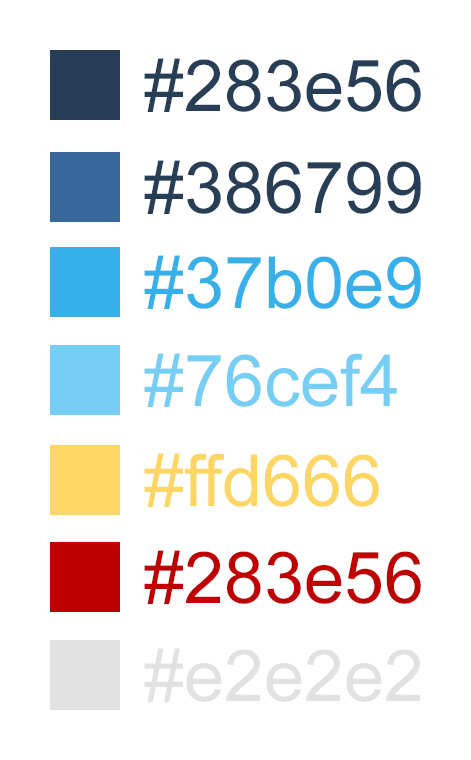
<style>
.page{position:relative;width:471px;height:760px;background:#ffffff}
.page>*{position:absolute;margin:0}
.t1{font:72px "ArialMT";color:#283e56}
.t2{font:72px "ArialMT";color:#37b0e9}
.t3{font:72px "ArialMT";color:#76cef4}
.t4{font:72px "ArialMT";color:#ffd666}
.t5{font:72px "ArialMT";color:#bd0000}
.t6{font:72px "ArialMT";color:#e2e2e2}
</style>
<div class="page">
<p class="t1" style="left:144px;top:58px;width:277px;height:54px">#283e56</p>
<p class="t1" style="left:144px;top:160px;width:277px;height:54px">#386799</p>
<p class="t2" style="left:144px;top:255px;width:277px;height:54px">#37b0e9</p>
<p class="t3" style="left:144px;top:353px;width:253px;height:54px">#76cef4</p>
<p class="t4" style="left:144px;top:453px;width:235px;height:54px">#ffd666</p>
<p class="t5" style="left:144px;top:550px;width:277px;height:54px">#283e56</p>
<p class="t6" style="left:144px;top:648px;width:276px;height:54px">#e2e2e2</p>
</div>
